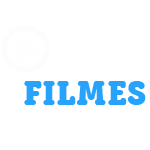
<style>
.page{position:relative;width:150px;height:150px;background:#ffffff}
.page>*{position:absolute;margin:0}
.t1{font:31.9px "eacologica-round_slab";color:#28a4fb}
</style>
<div class="page">
<p class="t1" style="left:24px;top:81px;width:122px;height:24px">FILMES</p>
</div>
